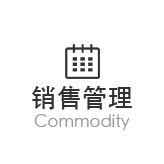
<style>
.page{position:relative;width:164px;height:164px;background:#ffffff}
.page>*{position:absolute;margin:0}
.t1{font:26px "STHeiti";color:#323232}
.t2{font:17px "STHeiti";color:#989898}
</style>
<div class="page">
<p class="t1" style="left:32px;top:85px;width:100px;height:25px">销售管理</p>
<p class="t2" style="left:34px;top:114px;width:96px;height:17px">Commodity</p>
</div>
